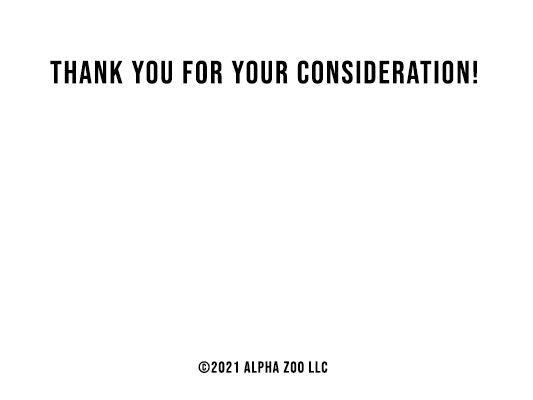
<style>
.page{position:relative;width:533px;height:400px;background:#ffffff}
.page>*{position:absolute;margin:0}
.t1{font:32px "BebasNeue-Regular";letter-spacing:0.06em;color:#000000}
.t2{font:16px "BebasNeue-Regular";letter-spacing:0.06em;color:#000000}
</style>
<div class="page">
<p class="t1" style="left:50px;top:60px;width:427px;height:24px">Thank you for your consideration!</p>
<p class="t2" style="left:198px;top:361px;width:130px;height:12px">©2021 Alpha Zoo LLC</p>
</div>
